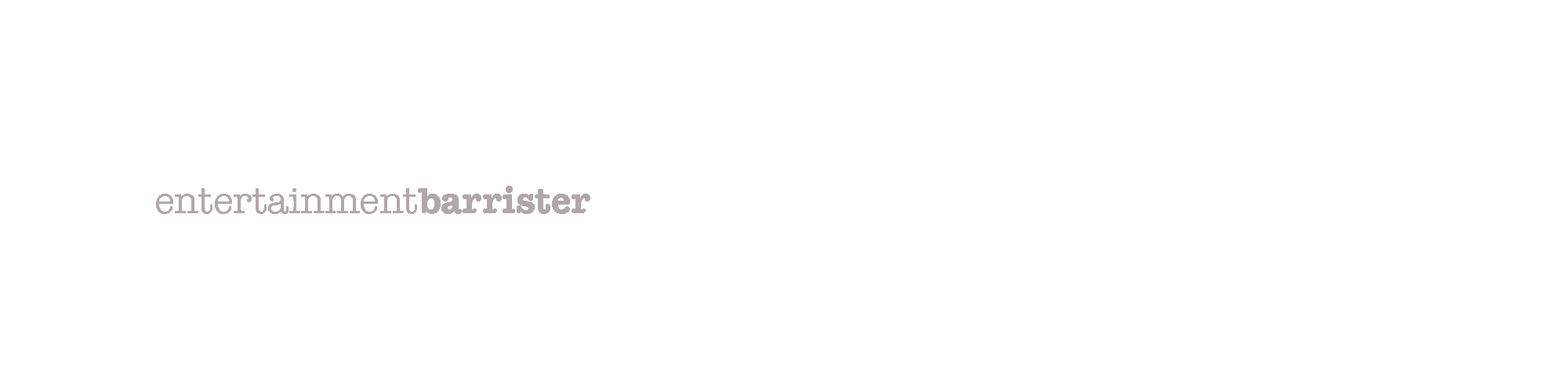
<style>
.page{position:relative;width:1568px;height:392px;background:#ffffff}
.page>*{position:absolute;margin:0}
.t1{font:37.6px "AmericanTypewriter";color:#b0a8a8}
.t2{font:37.6px "AmericanTypewriter-Bold";color:#b0a8a8}
</style>
<div class="page">
<p class="t1" style="left:156px;top:186px;width:434px;height:28px">entertainment<span class="t2">barrister</span></p>
</div>
